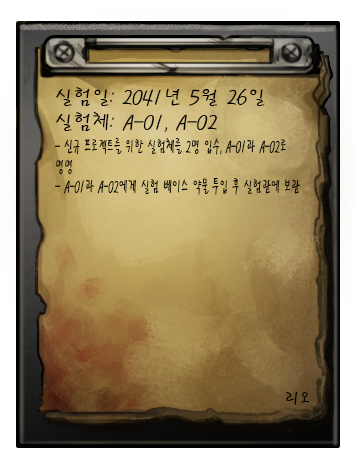
<style>
.page{position:relative;width:354px;height:460px}
.page>*{position:absolute;margin:0}
.t1{font:20.8px "PyunjiR-HM";color:#000000}
.t2{font:16.7px "PyunjiR-HM";color:#000000;scale:0.61 1}
.t3{font:16.7px "PyunjiR-HM";color:#000000}
</style>
<div class="page">
<p class="t1" style="left:56px;top:87px;width:209px;height:45px">실험일: 2041년 5월 26일<br>실험체: A-01, A-02</p>
<p class="t2" style="left:55px;top:138px;width:245px;height:57px">- 신규 프로젝트를 위한 실험체를 2명 입수, A-01과 A-02로 명명<br>- A-01과 A-02에게 실험 베이스 약물 투입 후 실험관에 보관<br>- A-02에게 부작용 발생</p>
<p class="t3" style="left:286px;top:392px;width:24px;height:13px">리오</p>
</div>
